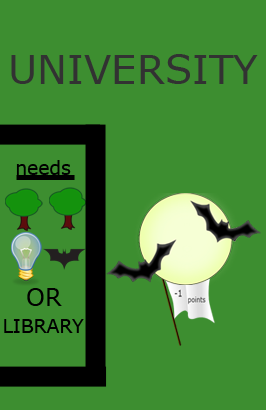
<style>
.page{position:relative;width:266px;height:410px;background:#3d8e30}
.page>*{position:absolute;margin:0}
.t1{font:40px "Verdana";color:#323232}
.t2{font:18.7px "Verdana";color:#000000}
.t3{font:24px "Verdana";color:#000000}
</style>
<div class="page">
<p class="t1" style="left:11px;top:54px;width:247px;height:30px">UNIVERSITY</p>
<p class="t2" style="left:16px;top:160px;width:55px;height:15px">needs</p>
<p class="t3" style="left:27px;top:288px;width:35px;height:18px">OR</p>
<p class="t2" style="left:4px;top:319px;width:80px;height:14px">LIBRARY</p>
</div>
